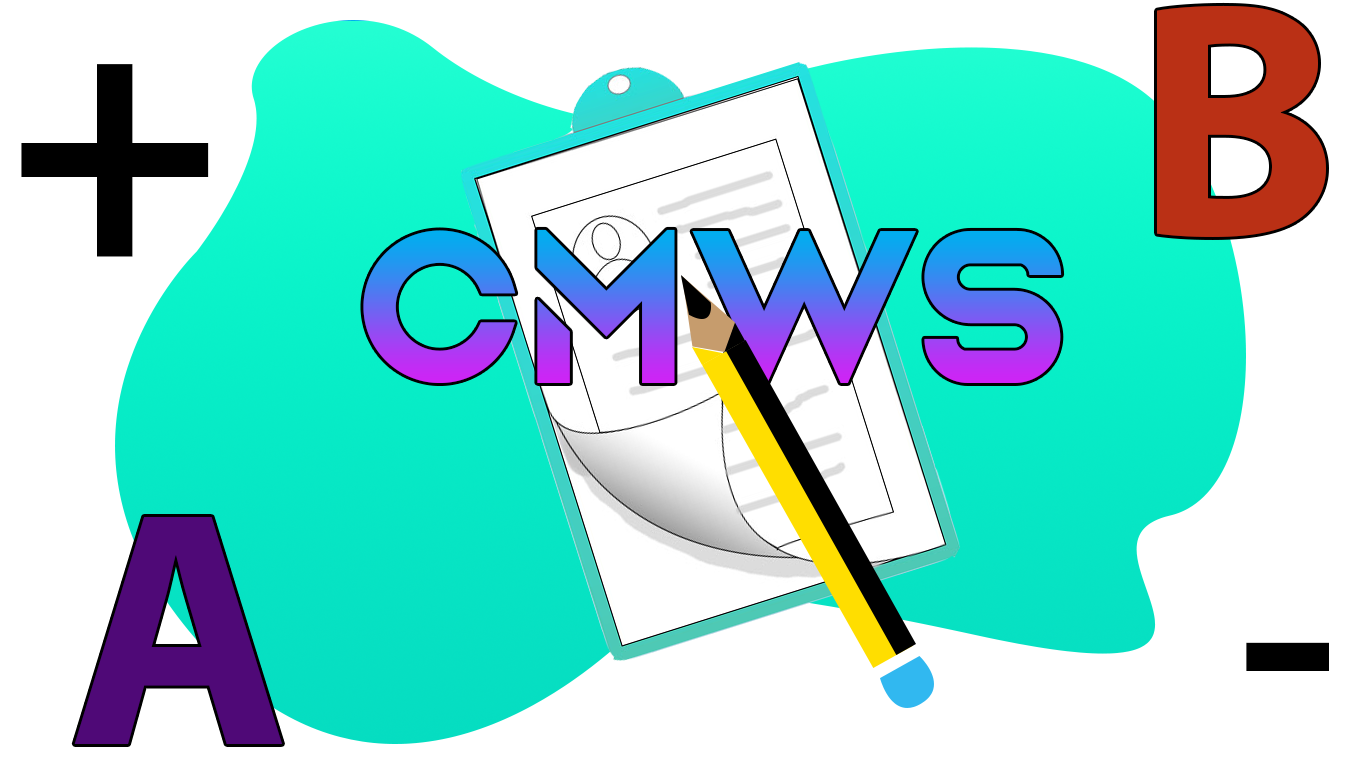
<style>
.page{position:relative;width:1366px;height:768px;background:#ffffff}
.page>*{position:absolute;margin:0}
.t1{font:337px "MyriadPro-Bold";color:#ba3015}
.t2{font:362px "MyriadPro-Bold";color:#000000}
.t3{font:230px "AquireBold"}
.t4{font:337px "MyriadPro-Bold";color:#4f0977}
.t5{font:279.7px "MyriadPro-Bold";color:#000000;scale:1.13 1}
</style>
<div class="page">
<p class="t1" style="left:1157px;top:5px;width:169px;height:232px">B</p>
<p class="t2" style="left:21px;top:64px;width:188px;height:193px">+</p>
<p class="t3" style="left:363px;top:229px;width:699px;height:154px">CMWS</p>
<p class="t4" style="left:74px;top:517px;width:208px;height:227px">A</p>
<p class="t5" style="left:1246px;top:642px;width:83px;height:29px">-</p>
</div>
